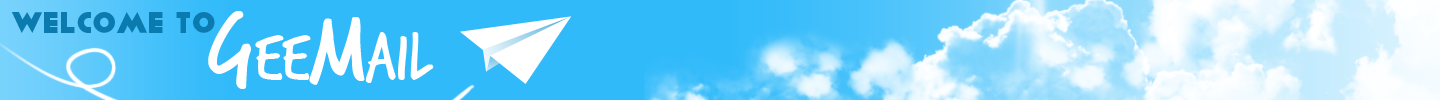
<style>
.page{position:relative;width:1440px;height:100px;background:#31bafa}
.page>*{position:absolute;margin:0}
.t1{font:30px "Viafont";color:#0b7baf}
.t2{font:75.1px "TrashHand";color:#ffffff}
.t3{font:104.3px "TrashHand";color:#ffffff}
</style>
<div class="page">
<p class="t1" style="left:11px;top:12px;width:204px;height:21px">Welcome to</p>
<p class="t2" style="left:208px;top:11px;width:226px;height:78px"><span class="t3">G</span>ee<span class="t3">M</span>ail</p>
</div>
